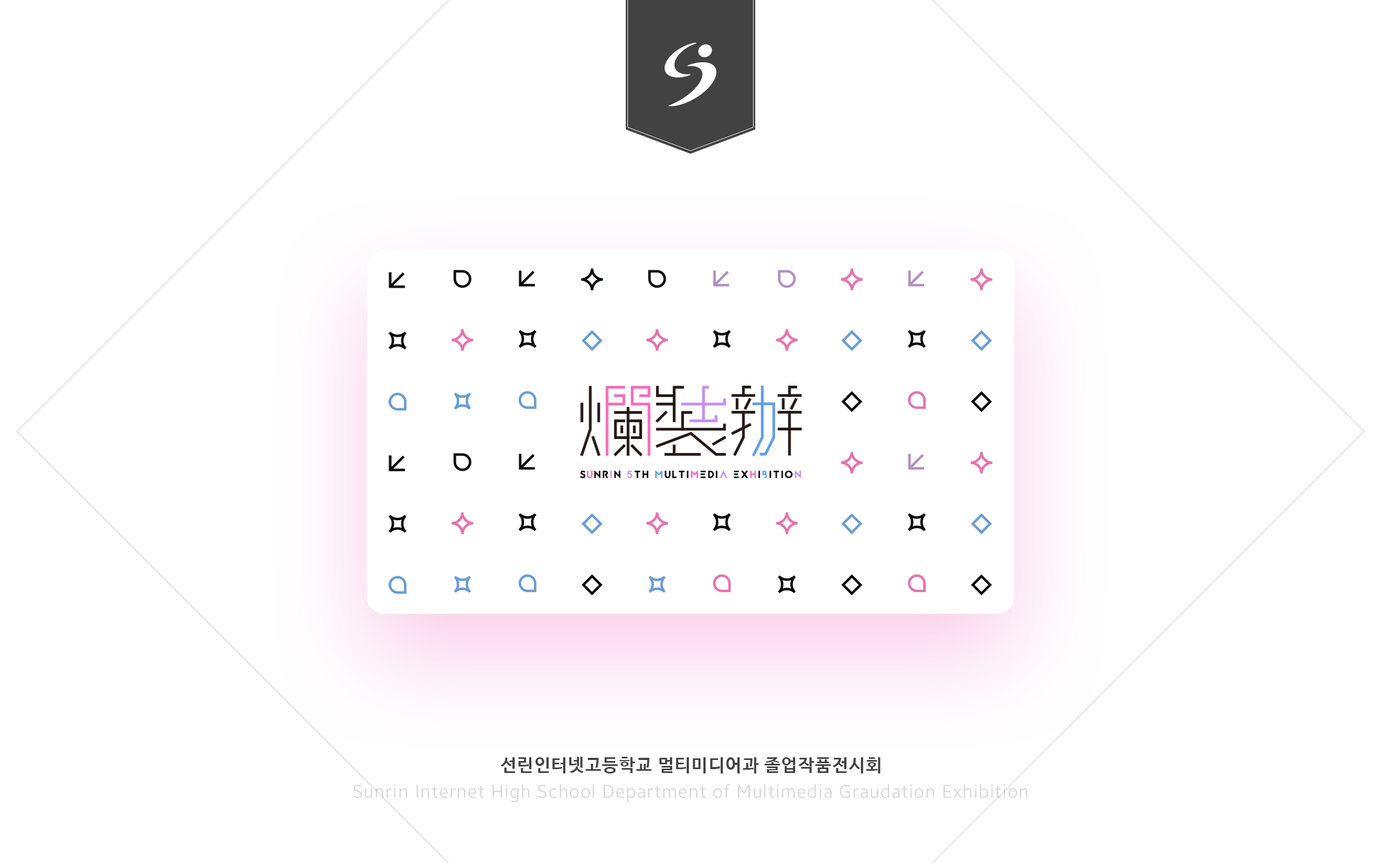
<style>
.page{position:relative;width:1381px;height:863px;background:#ffffff}
.page>*{position:absolute;margin:0}
.t1{font:18px "NanumBarunGothicBold";letter-spacing:0.05em;color:#424242}
.t2{font:18px "BreezeSans-Light";letter-spacing:0.05em;color:#d2d2d2}
</style>
<div class="page">
<p class="t1" style="left:501px;top:757px;width:380px;height:17px">선린인터넷고등학교 멀티미디어과 졸업작품전시회</p>
<p class="t2" style="left:353px;top:784px;width:675px;height:19px">Sunrin Internet High School Department of Multimedia Graudation Exhibition</p>
</div>
